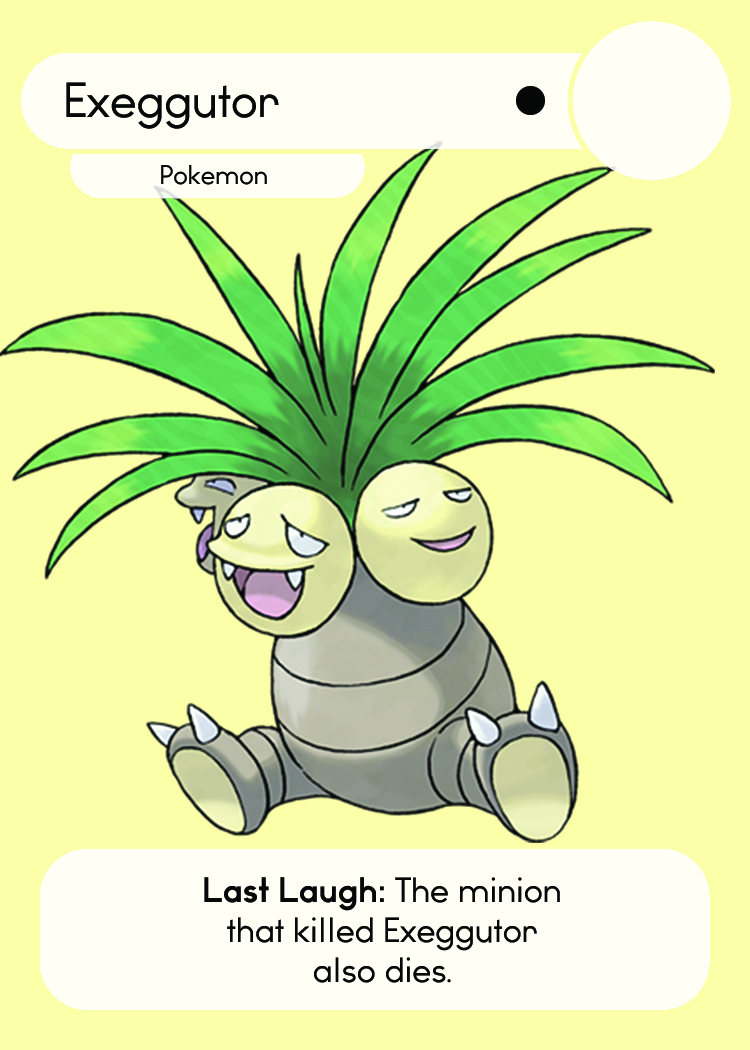
<style>
.page{position:relative;width:750px;height:1050px;background:#fbffa8}
.page>*{position:absolute;margin:0}
.t1{font:46.7px "WatchwordRegularDemo";color:#060808}
.t2{font:25.5px "WatchwordRegularDemo";color:#060808}
.t3{font:33.3px "WatchwordRegularDemo";color:#060808}
.t4{font:33.3px "WatchwordBoldDemo";color:#060808}
.t5{font:29.2px "Dosis-Medium";color:#060808}
</style>
<div class="page">
<p class="t1" style="left:66px;top:82px;width:213px;height:47px">Exeggutor</p>
<p class="t2" style="left:161px;top:165px;width:106px;height:20px">Pokemon</p>
<p class="t3" style="left:204px;top:877px;width:356px;height:106px;text-align:center"><span class="t4">Last Laugh: </span>The minion<br>that killed Exeggutor<br>also dies<span class="t5">.</span></p>
</div>
